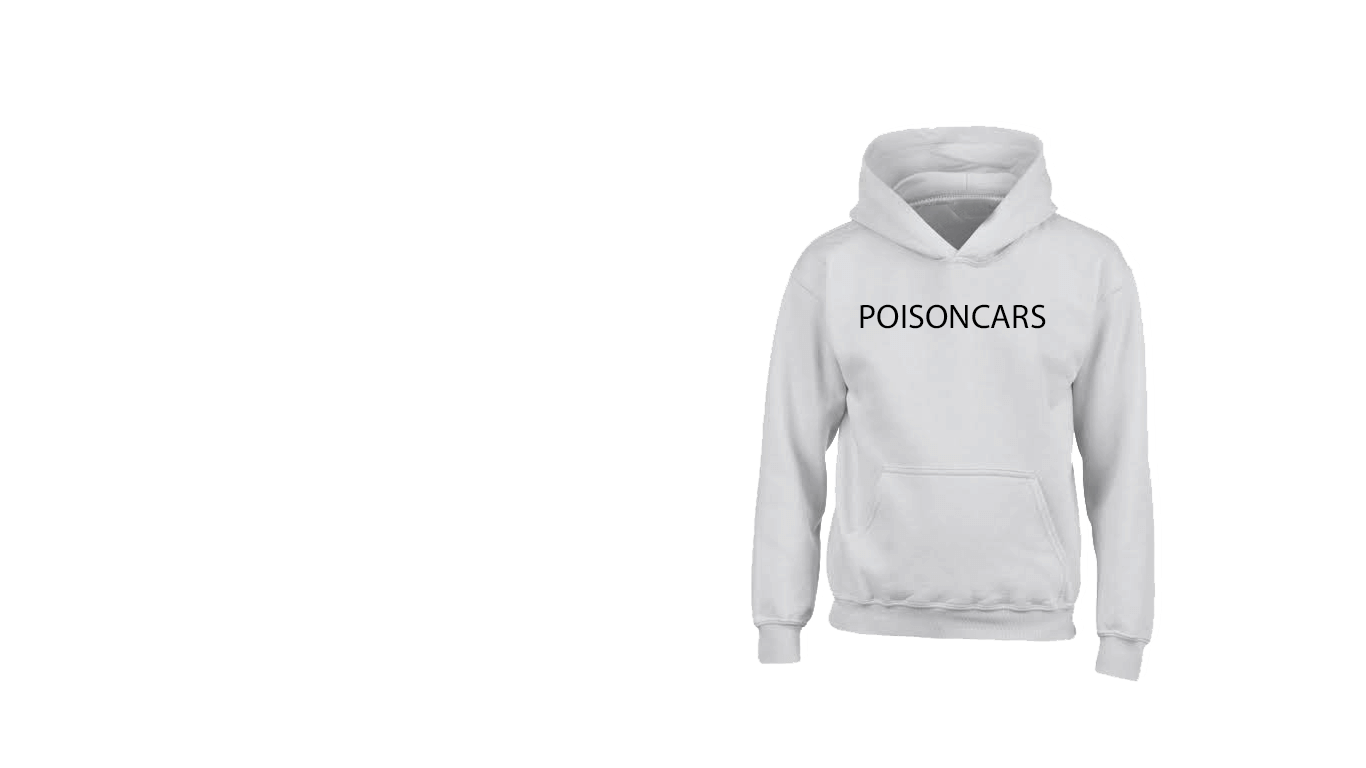
<style>
.page{position:relative;width:1366px;height:768px;background:#ffffff}
.page>*{position:absolute;margin:0}
.t1{font:34px "MyriadPro-Regular";color:#000000}
</style>
<div class="page">
<p class="t1" style="left:860px;top:304px;width:186px;height:25px">POISONCARS</p>
</div>
